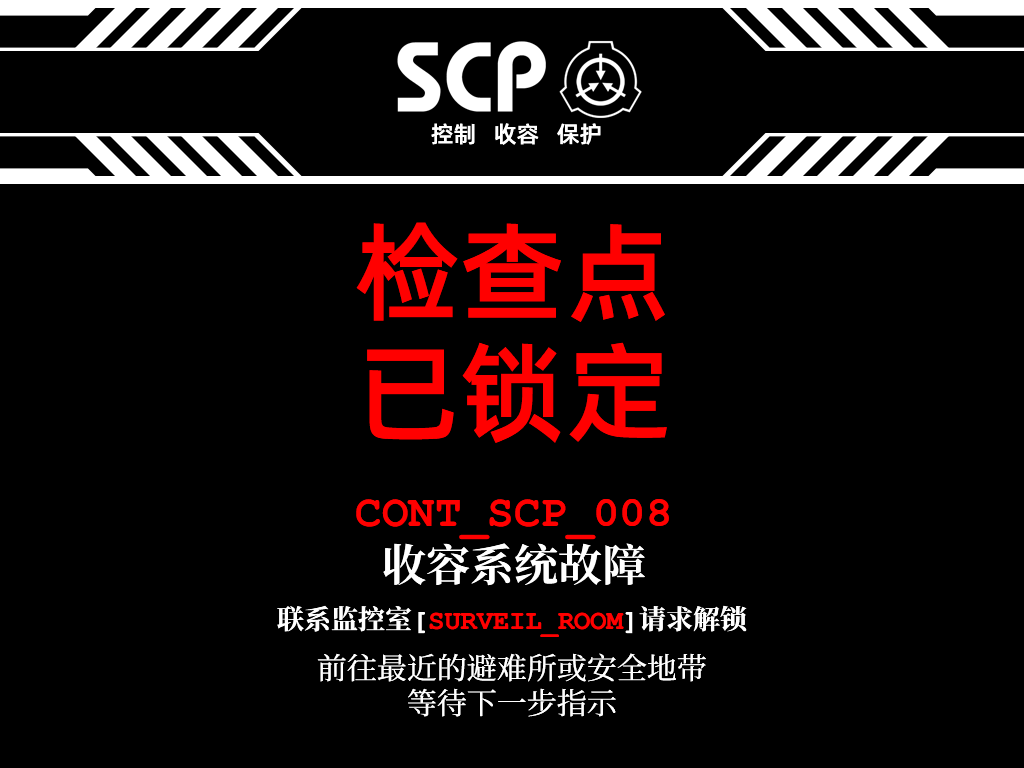
<style>
.page{position:relative;width:1024px;height:768px;background:#000000}
.page>*{position:absolute;margin:0}
.t1{font:23px "AlibabaPuHuiTiM";color:#ffffff}
.t2{font:107px/120px "AlibabaPuHuiTiM";color:#ff0000}
.t3{font:44px/55px "ContainmentBreach-Bold";color:#ff0000}
.t4{font:44px/55px "CourierNewPS-BoldMT";color:#ff0000}
.t5{font:44px/55px "ContainmentBreach-Bold";color:#ffffff}
.t6{font:27px "ContainmentBreach-Bold";color:#ff0000}
.t7{font:27px "ContainmentBreach-Bold";color:#ffffff}
.t8{font:30px/35px "ContainmentBreach-Regular";color:#ffffff}
</style>
<div class="page">
<p class="t1" style="left:431px;top:123px;width:170px;height:22px">控制   收容   保护</p>
<p class="t2" style="left:356px;top:222px;width:311px;height:221px">检查点<br>已锁定</p>
<p class="t3" style="left:356px;top:499px;width:313px;height:87px;text-align:center">CONT_SCP_<span class="t4">008<br></span><span class="t5">收容系统故障</span></p>
<p class="t6" style="left:277px;top:605px;width:470px;height:32px"><span class="t7">联系监控室[</span>SURVEIL_ROOM<span class="t7">]请求解锁</span></p>
<p class="t8" style="left:317px;top:653px;width:389px;height:64px;text-align:center">前往最近的避难所或安全地带<br>等待下一步指示</p>
</div>
